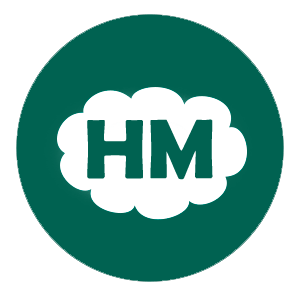
<style>
.page{position:relative;width:300px;height:300px;background:#ffffff}
.page>*{position:absolute;margin:0}
.t1{font:84.8px "BerlinSansFBDemi-Bold";color:#006251}
</style>
<div class="page">
<p class="t1" style="left:87px;top:119px;width:126px;height:61px">HM</p>
</div>
